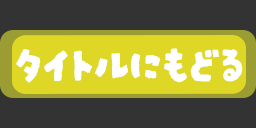
<style>
.page{position:relative;width:256px;height:128px;background:#333333}
.page>*{position:absolute;margin:0}
.t1{font:45px "DarumadropOne-Regular";color:#ffffff}
</style>
<div class="page">
<p class="t1" style="left:16px;top:48px;width:227px;height:35px">タイトルにもどる</p>
</div>
